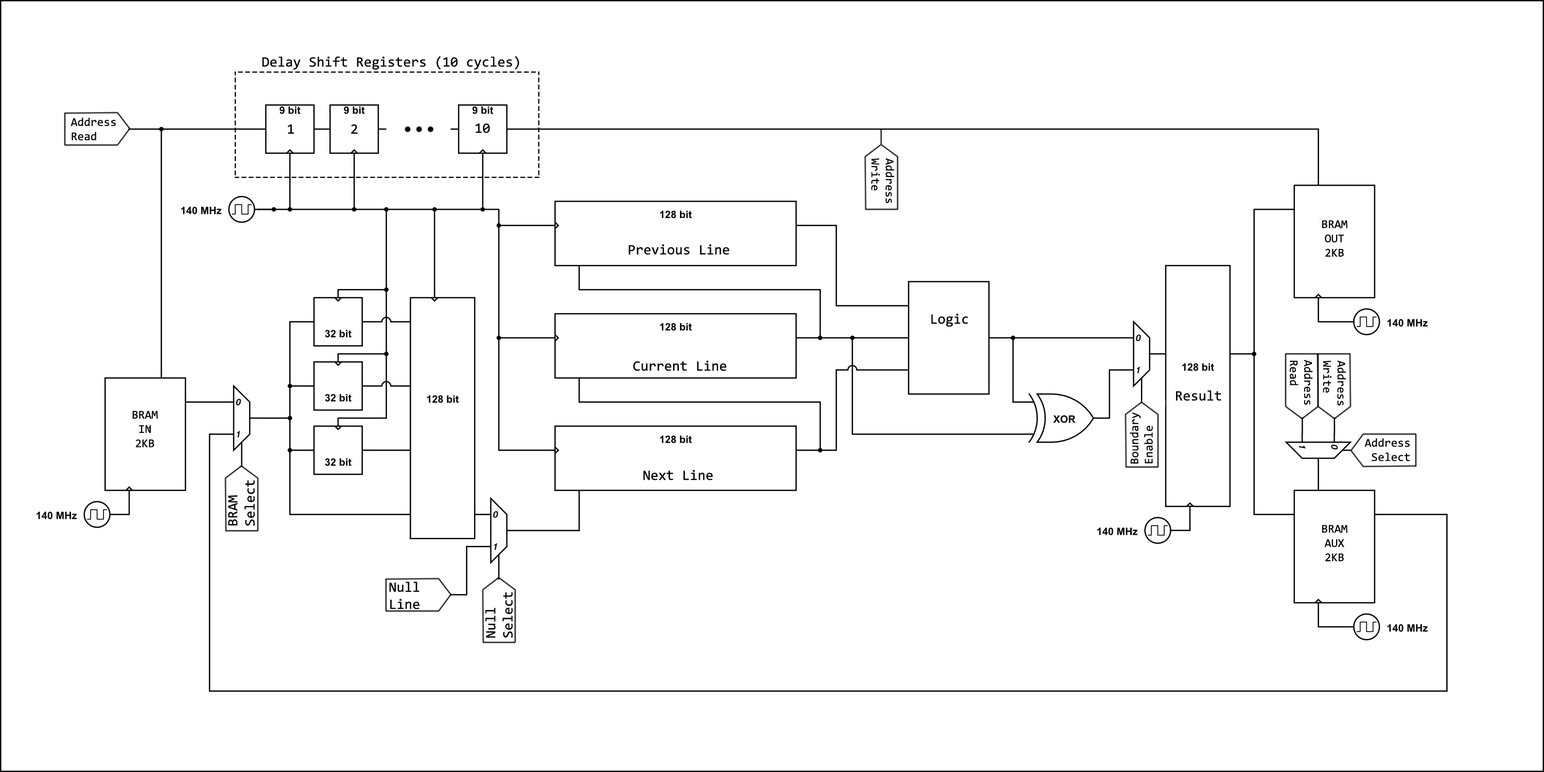
<style>
.page{position:relative;width:1544px;height:772px;background:#ffffff}
.page>*{position:absolute;margin:0}
.t1{font:14.3px "Consolas";color:#000000}
.t2{font:11.9px "Consolas";color:#000000}
</style>
<div class="page">
<p class="t1" style="left:262px;top:56px;width:257px;height:14px">Delay Shift Registers (10 cycles)</p>
<p class="t2" style="left:70px;top:117px;width:46px;height:23px">Address<br>Read</p>
<p class="t1" style="left:288px;top:124px;width:70px;height:10px">1    2</p>
<p class="t1" style="left:475px;top:124px;width:15px;height:9px">10</p>
<p class="t2" style="left:871px;top:158px;width:23px;height:45px;rotate:90deg">Address <br>Write</p>
<p class="t2" style="left:1322px;top:220px;width:25px;height:37px;text-align:center">BRAM<br>OUT<br>2KB</p>
<p class="t1" style="left:628px;top:244px;width:101px;height:11px">Previous Line</p>
<p class="t1" style="left:931px;top:313px;width:37px;height:14px">Logic</p>
<p class="t1" style="left:633px;top:361px;width:94px;height:10px">Current Line</p>
<p class="t2" style="left:1290px;top:360px;width:23px;height:45px;rotate:90deg">Address<br>Read</p>
<p class="t2" style="left:1323px;top:361px;width:23px;height:45px;rotate:90deg">Address <br>Write</p>
<p class="t1" style="left:1176px;top:391px;width:45px;height:10px">Result</p>
<p class="t2" style="left:132px;top:411px;width:26px;height:37px;text-align:center">BRAM<br>IN<br>2KB</p>
<p class="t2" style="left:1130px;top:413px;width:23px;height:51px;rotate:-90deg">Boundary<br>Enable</p>
<p class="t2" style="left:1364px;top:438px;width:46px;height:24px;text-align:right">Address<br>Select</p>
<p class="t1" style="left:643px;top:470px;width:70px;height:11px">Next Line</p>
<p class="t1" style="left:228px;top:481px;width:27px;height:45px;rotate:-90deg">BRAM<br>Select</p>
<p class="t2" style="left:1322px;top:525px;width:25px;height:37px;text-align:center">BRAM<br>AUX<br>2KB</p>
<p class="t1" style="left:389px;top:582px;width:30px;height:28px">Null <br>Line</p>
<p class="t1" style="left:485px;top:592px;width:28px;height:46px;rotate:-90deg">Null<br>Select</p>
</div>
